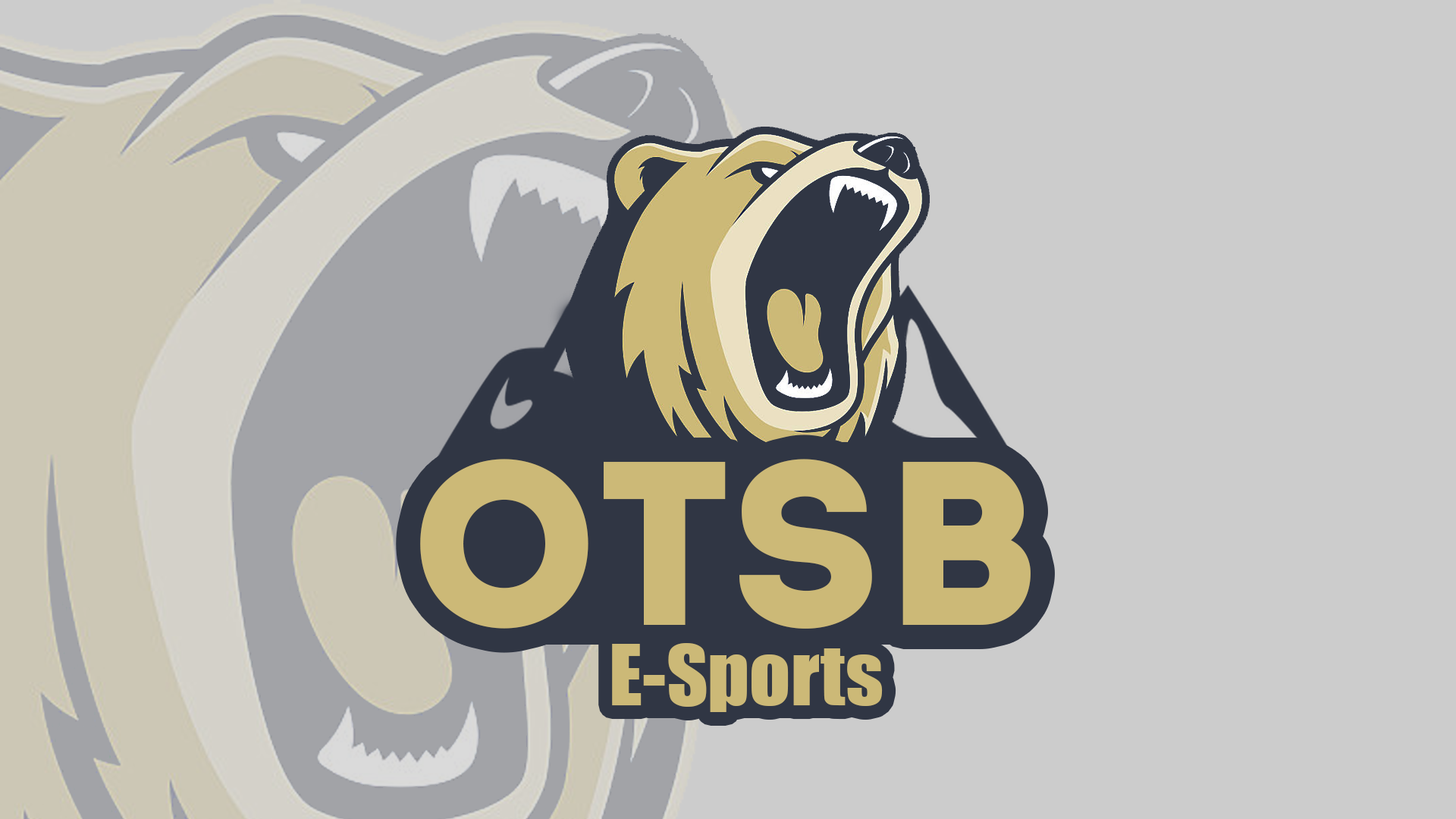
<style>
.page{position:relative;width:1456px;height:819px;background:#cccccc}
.page>*{position:absolute;margin:0}
.t1{font:232.7px "Intro";color:#ccb977}
.t2{font:77.6px "Impact";color:#ccb977;scale:1.04 1}
</style>
<div class="page">
<p class="t1" style="left:420px;top:459px;width:611px;height:170px">OTSB</p>
<p class="t2" style="left:612px;top:643px;width:271px;height:69px">E-Sports</p>
</div>
